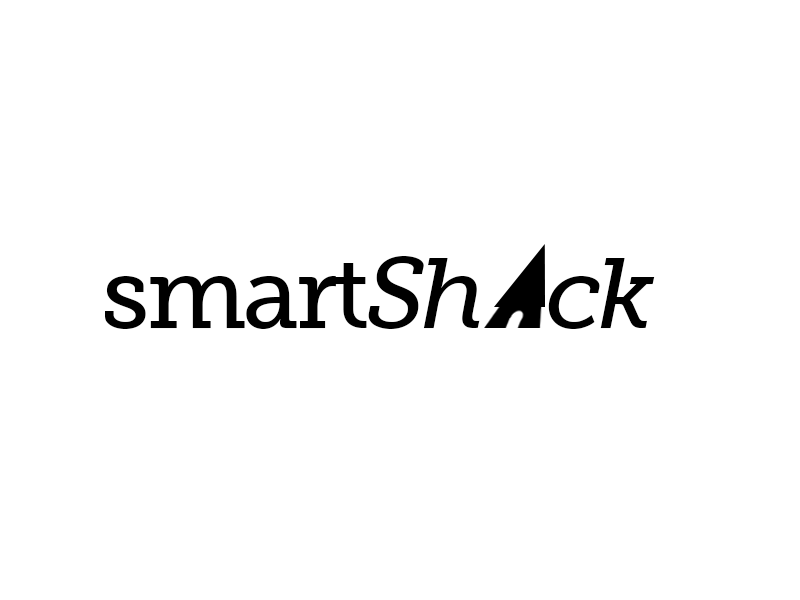
<style>
.page{position:relative;width:800px;height:600px;background:#ffffff}
.page>*{position:absolute;margin:0}
.t1{font:100px "MuseoSlab-500Italic";letter-spacing:-0.04em;color:#000000}
.t2{font:100px "MuseoSlab-500";letter-spacing:-0.04em;color:#000000}
</style>
<div class="page">
<p class="t1" style="left:105px;top:256px;width:550px;height:73px"><span class="t2">smart</span>Sh   ck</p>
</div>
